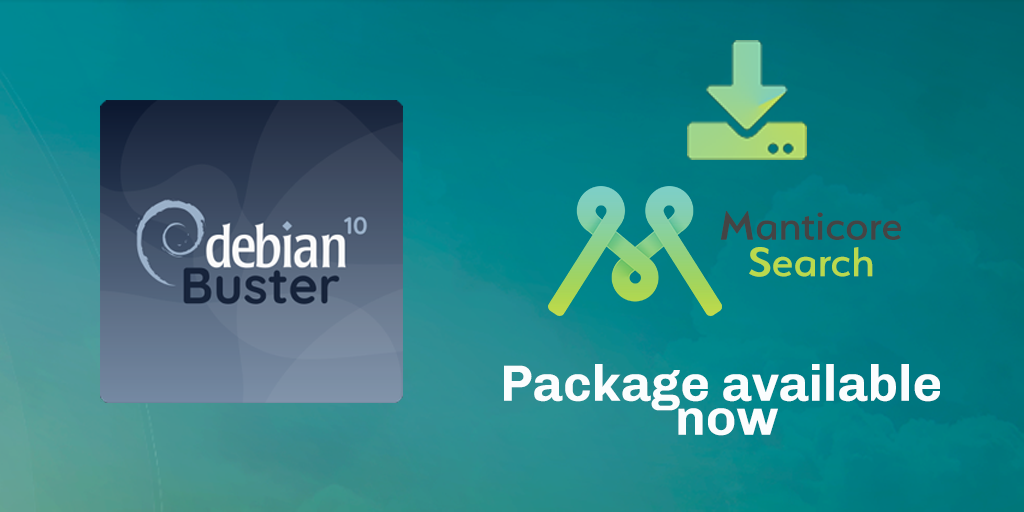
<style>
.page{position:relative;width:1024px;height:512px}
.page>*{position:absolute;margin:0}
.t1{font:45.8px "Serenity-Medium";color:#444444;scale:1.03 1}
.t2{font:45.8px "Serenity-DemiBold";color:#444444;scale:1.03 1}
.t3{font:46.3px "Serenity-Medium";color:#bad94d;scale:1.04 1}
.t4{font:46.3px "Serenity-DemiBold";color:#bad94d;scale:1.04 1}
.t5{font:51px/34px "Chivo-Bold";color:#fbfdfe}
</style>
<div class="page">
<p class="t1" style="left:720px;top:211px;width:181px;height:29px"><span class="t2">M</span>anticore</p>
<p class="t3" style="left:749px;top:247px;width:124px;height:30px"><span class="t4">S</span>earch</p>
<p class="t5" style="left:504px;top:364px;width:436px;height:72px;text-align:center">Package available <br>now</p>
</div>
